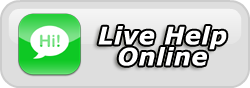
<style>
.page{position:relative;width:250px;height:88px;background:#dedede}
.page>*{position:absolute;margin:0}
.t1{font:24px/21px "Verdana-BoldItalic";letter-spacing:0.025em;color:#ffffff}
</style>
<div class="page">
<p class="t1" style="left:98px;top:26px;width:129px;height:40px;text-align:center">Live Help<br>Online</p>
</div>
